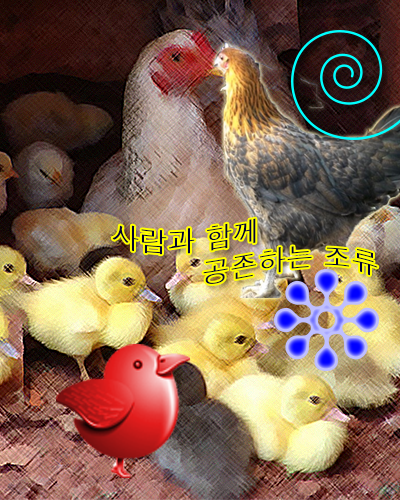
<style>
.page{position:relative;width:400px;height:500px}
.page>*{position:absolute;margin:0}
.t1{font:28.1px "Dotum";color:#000033}
</style>
<div class="page">
<p class="t1" style="left:112px;top:218px;width:266px;height:66px">사람과 함께<br>    공존하는 조류</p>
</div>
